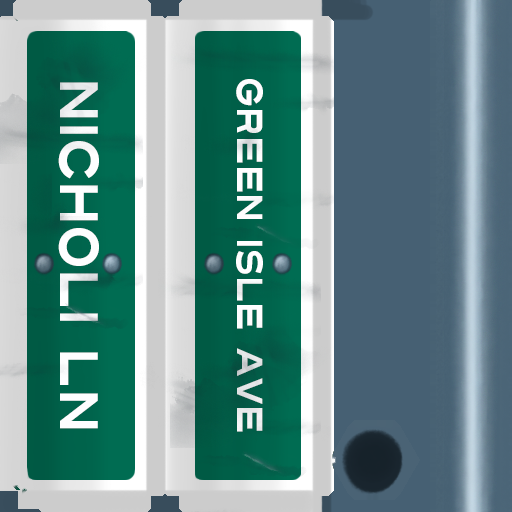
<style>
.page{position:relative;width:512px;height:512px}
.page>*{position:absolute;margin:0}
.t1{font:54px "Turnpike";color:#fefeff;scale:0.75 1}
.t2{font:36px "Turnpike";color:#fefeff;scale:0.75 1}
</style>
<div class="page">
<p class="t1" style="left:58px;top:82px;width:41px;height:347px;rotate:90deg">Nicholi Ln</p>
<p class="t2" style="left:236px;top:79px;width:27px;height:353px;rotate:90deg">Green isle Ave</p>
</div>
